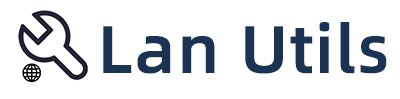
<style>
.page{position:relative;width:400px;height:99px;background:#ffffff}
.page>*{position:absolute;margin:0}
.t1{font:66.7px "AlibabaPuHuiTi_3_75_SemiBold";color:#1a3353;font-weight:bold}
</style>
<div class="page">
<p class="t1" style="left:103px;top:22px;width:284px;height:52px">Lan Utils</p>
</div>
